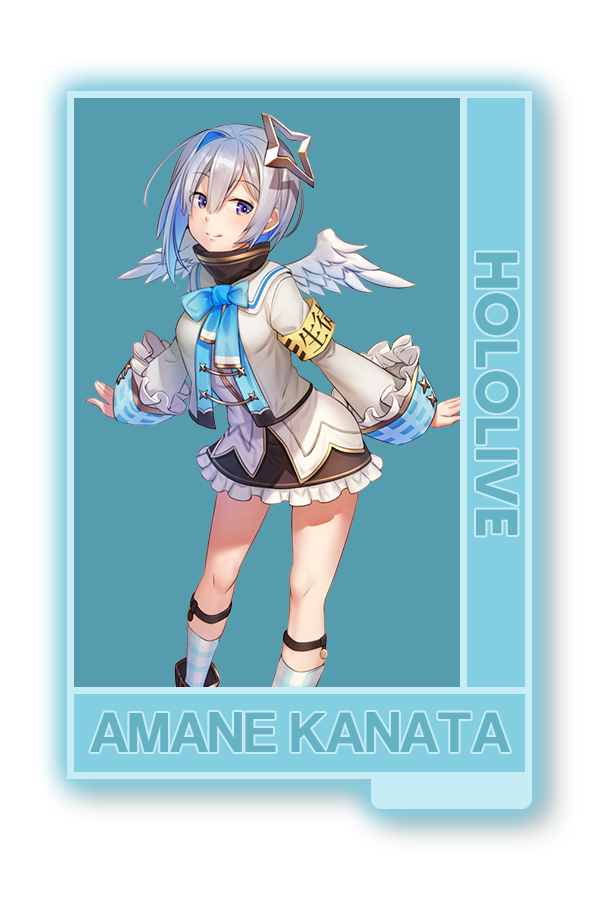
<style>
.page{position:relative;width:600px;height:900px;background:#549cae}
.page>*{position:absolute;margin:0}
.t1{font:59.2px "MADETOMMY-Bold";color:#66b2c5}
.t2{font:59.8px "CoolveticaRg-Regular";color:#66b2c5}
</style>
<div class="page">
<p class="t1" style="left:475px;top:252px;width:44px;height:284px;rotate:90deg">HOLOLIVE</p>
<p class="t2" style="left:90px;top:712px;width:421px;height:40px">AMANE KANATA</p>
</div>
